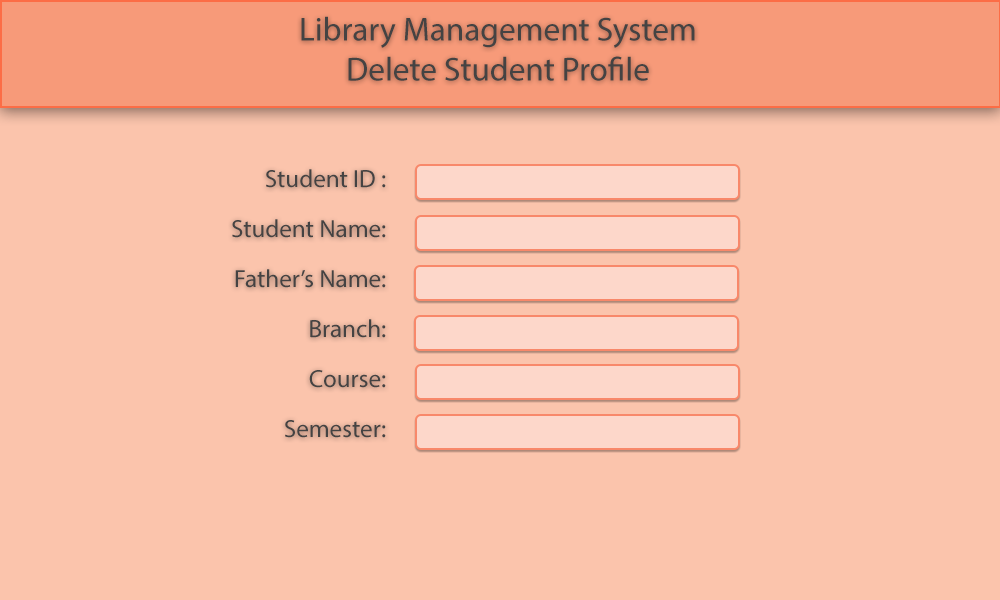
<style>
.page{position:relative;width:1000px;height:600px;background:#fbc4ac}
.page>*{position:absolute;margin:0}
.t1{font:33.3px "MyriadPro-Regular";color:#444343}
.t2{font:25px/50px "MyriadPro-Regular";color:#444343}
</style>
<div class="page">
<p class="t1" style="left:301px;top:16px;width:394px;height:65px;text-align:center">Library Management System<br>Delete Student Profile</p>
<p class="t2" style="left:232px;top:169px;width:154px;height:269px;text-align:right">Student ID : <br>Student Name:<br>Father’s Name:<br>Branch:<br>Course:<br>Semester:</p>
</div>
